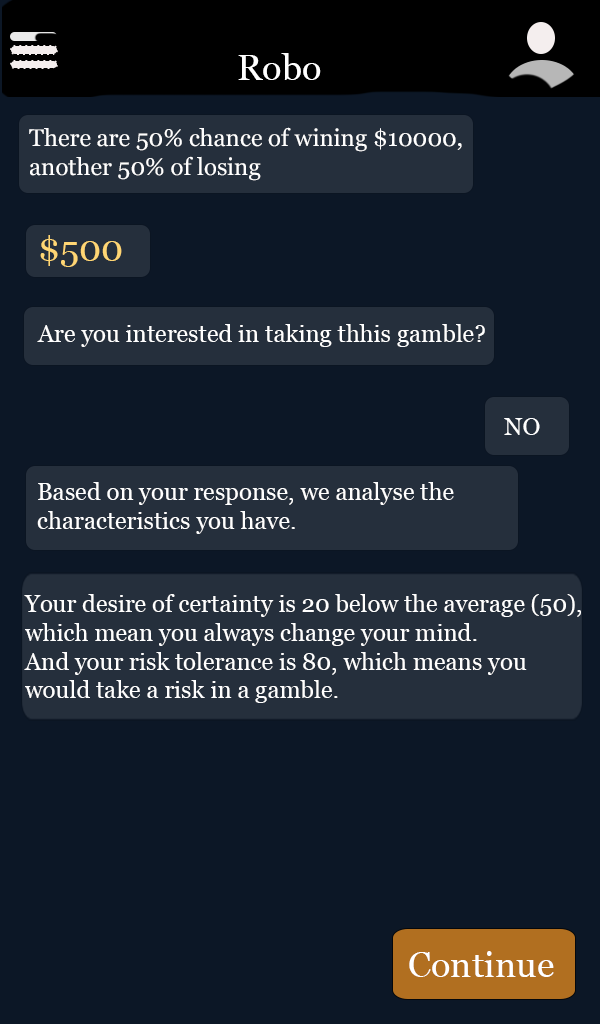
<style>
.page{position:relative;width:600px;height:1024px;background:#0c1726}
.page>*{position:absolute;margin:0}
.t1{font:36px "Georgia";color:#ffffff}
.t2{font:24px "Georgia";color:#ffffff}
.t3{font:36px "Georgia";color:#ffd164}
</style>
<div class="page">
<p class="t1" style="left:238px;top:53px;width:83px;height:27px">Robo</p>
<p class="t2" style="left:29px;top:127px;width:433px;height:54px">There are 50% chance of wining $10000,<br>another 50% of losing</p>
<p class="t3" style="left:40px;top:235px;width:82px;height:32px">$500</p>
<p class="t2" style="left:37px;top:324px;width:448px;height:23px">Are you interested in taking thhis gamble?</p>
<p class="t2" style="left:504px;top:418px;width:36px;height:17px">NO</p>
<p class="t2" style="left:37px;top:482px;width:417px;height:52px">Based on your response, we analyse the<br>characteristics you have.</p>
<p class="t2" style="left:24px;top:594px;width:557px;height:109px">Your desire of certainty is 20 below the average (50),<br>which mean you always change your mind. <br>And your risk tolerance is 80, which means you <br>would take a risk in a gamble.</p>
<p class="t1" style="left:409px;top:951px;width:145px;height:26px">Continue</p>
</div>
